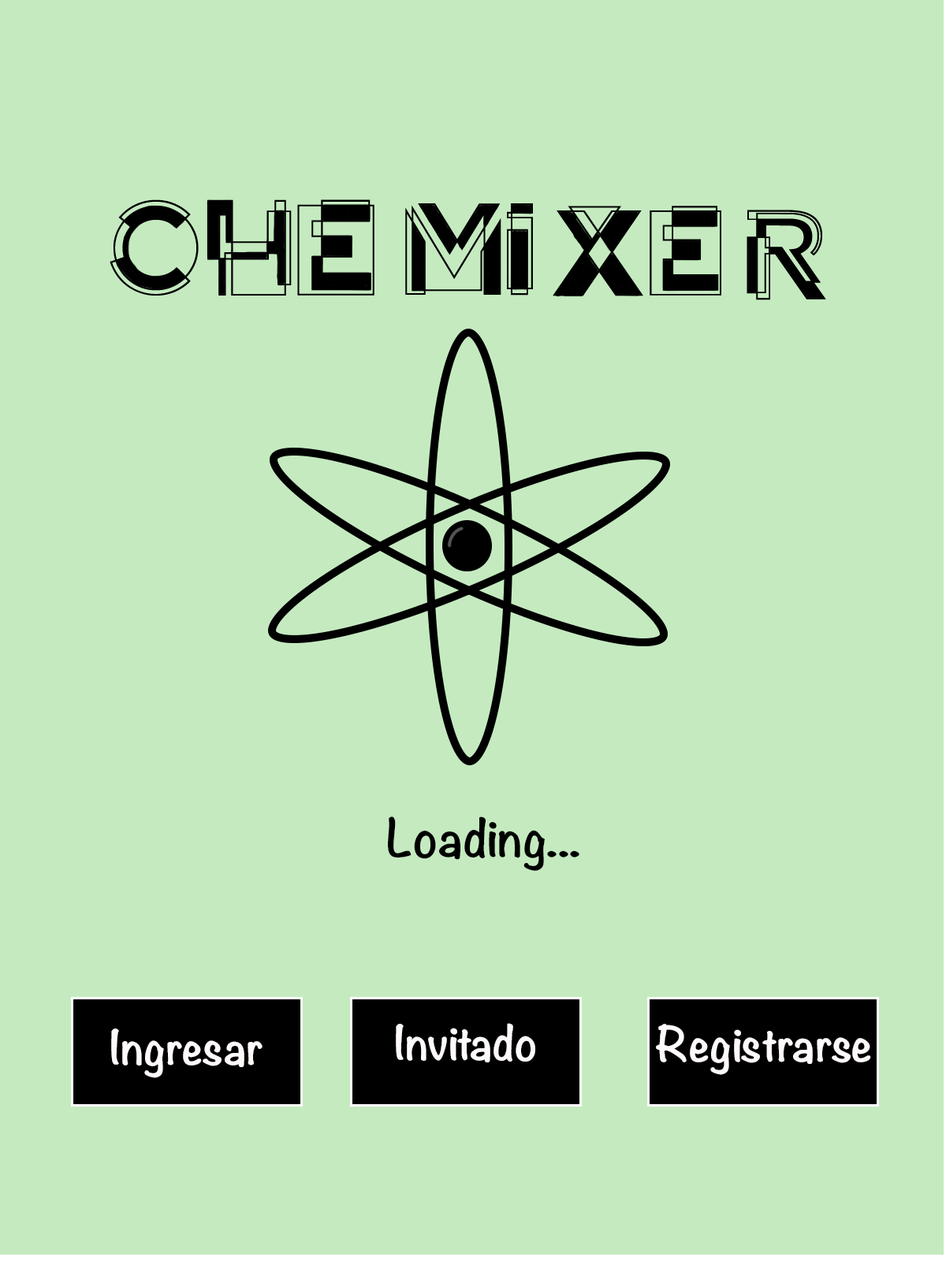
<style>
.page{position:relative;width:946px;height:1261px;background:#c5eac0}
.page>*{position:absolute;margin:0}
.t1{font:47.3px "Noteworthy-Bold";color:#000000}
.t2{font:43.3px "Noteworthy-Bold";color:#fffafa}
</style>
<div class="page">
<p class="t1" style="left:388px;top:816px;width:191px;height:55px">Loading...</p>
<p class="t2" style="left:396px;top:1023px;width:139px;height:39px">Invitado</p>
<p class="t2" style="left:656px;top:1024px;width:215px;height:51px">Registrarse</p>
<p class="t2" style="left:111px;top:1028px;width:151px;height:50px">Ingresar</p>
</div>
